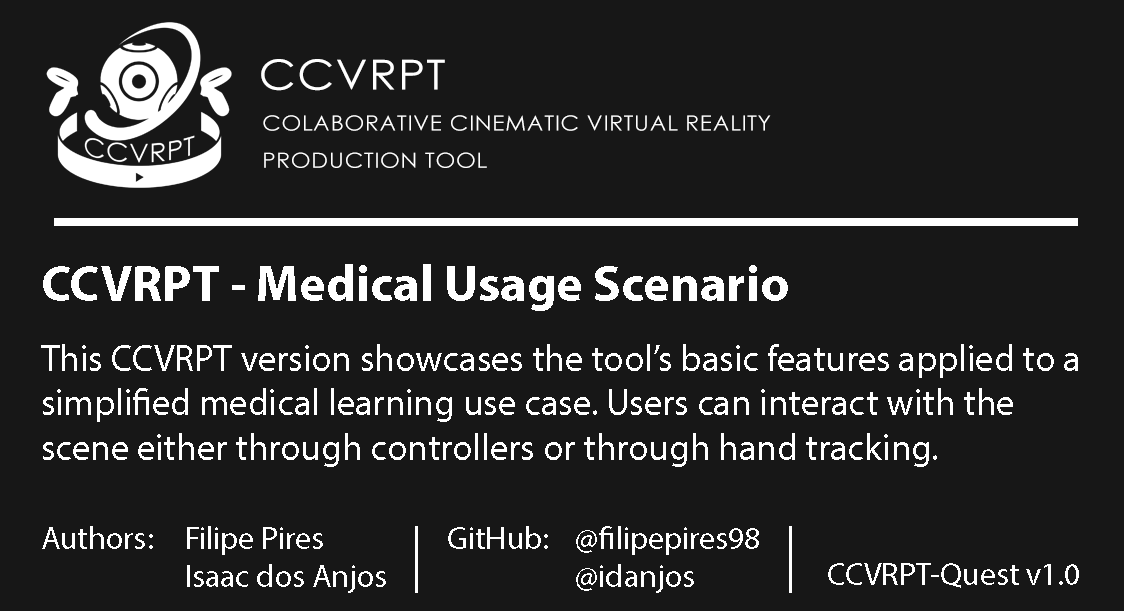
<style>
.page{position:relative;width:1124px;height:611px;background:#171717}
.page>*{position:absolute;margin:0}
.t1{font:41.6px "CenturyGothic";letter-spacing:0.025em;color:#ffffff;scale:1.1 1}
.t2{font:20.8px/37.3px "CenturyGothic";letter-spacing:0.025em;color:#ffffff;scale:1.1 1}
.t3{font:37.3px "MyriadPro-Regular";color:#ffffff}
.t4{font:50.7px/69.3px "MyriadPro-Bold";color:#ffffff}
.t5{font:37.3px/69.3px "MyriadPro-Regular";color:#ffffff}
.t6{font:32px "MyriadPro-Regular";color:#ffffff}
</style>
<div class="page">
<p class="t1" style="left:261px;top:59px;width:184px;height:32px">CCVRPT</p>
<p class="t2" style="left:263px;top:115px;width:508px;height:53px">COLABORATIVE CINEMATIC VIRTUAL REALITY<br>PRODUCTION TOOL</p>
<p class="t3" style="left:41px;top:264px;width:1037px;height:203px"><span class="t4">CCVRPT - Medical Usage Scenario<br></span><span class="t5">T</span>his CCVRPT version showcases the tool’s basic features applied to a <br>simplified medical learning use case. Users can interact with the <br>scene either through controllers or through hand tracking.</p>
<p class="t6" style="left:42px;top:526px;width:344px;height:67px">Authors: Filipe Pires<br>    Isaac dos Anjos</p>
<p class="t6" style="left:448px;top:526px;width:311px;height:67px">GitHub:    @filipepires98<br>      @idanjos</p>
<p class="t6" style="left:828px;top:563px;width:251px;height:25px">CCVRPT-Quest v1.0</p>
</div>
